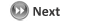
<style>
.page{position:relative;width:88px;height:23px;background:#ffffff}
.page>*{position:absolute;margin:0}
.t1{font:14px "Calibri-Bold";color:#363535}
</style>
<div class="page">
<p class="t1" style="left:33px;top:7px;width:27px;height:9px">Next</p>
</div>
